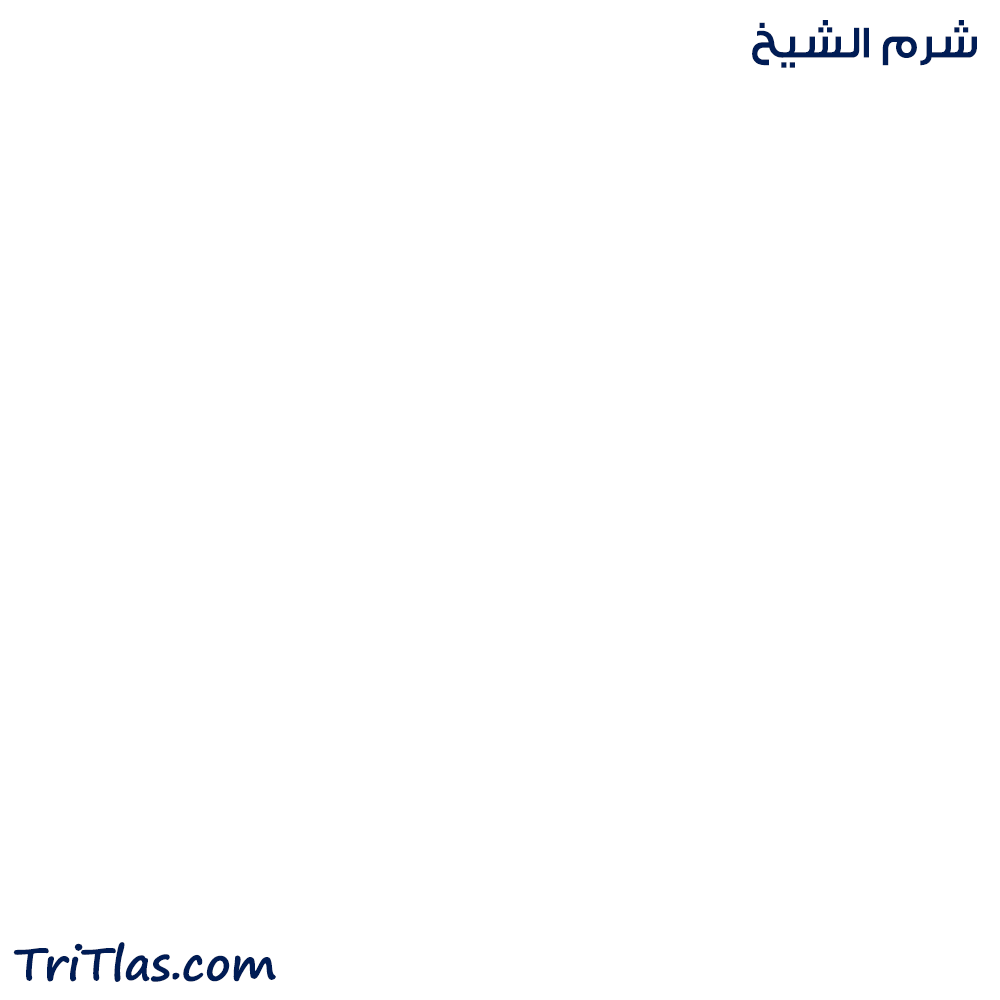
<style>
.page{position:relative;width:1000px;height:1000px;background:#ffffff}
.page>*{position:absolute;margin:0}
.t1{font:45.8px "GESSTwoMedium-Medium";color:#001c55}
.t2{font:45.8px "SegoePrint-Bold";color:#001c55}
</style>
<div class="page">
<p class="t1" style="left:752px;top:20px;width:225px;height:48px">ﺦﻴﺸﻟﺍ ﻡﺮﺷ</p>
<p class="t2" style="left:13px;top:942px;width:263px;height:40px">TriTlas.com</p>
</div>
